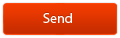
<style>
.page{position:relative;width:120px;height:38px}
.page>*{position:absolute;margin:0}
.t1{font:14px "MyriadPro-Regular"}
.t2{font:14px "MyriadPro-Regular";color:#ffffff}
</style>
<div class="page">
<p class="t1" style="left:43px;top:12px;width:29px;height:10px">Send</p>
<p class="t2" style="left:43px;top:13px;width:29px;height:10px">Send</p>
</div>
